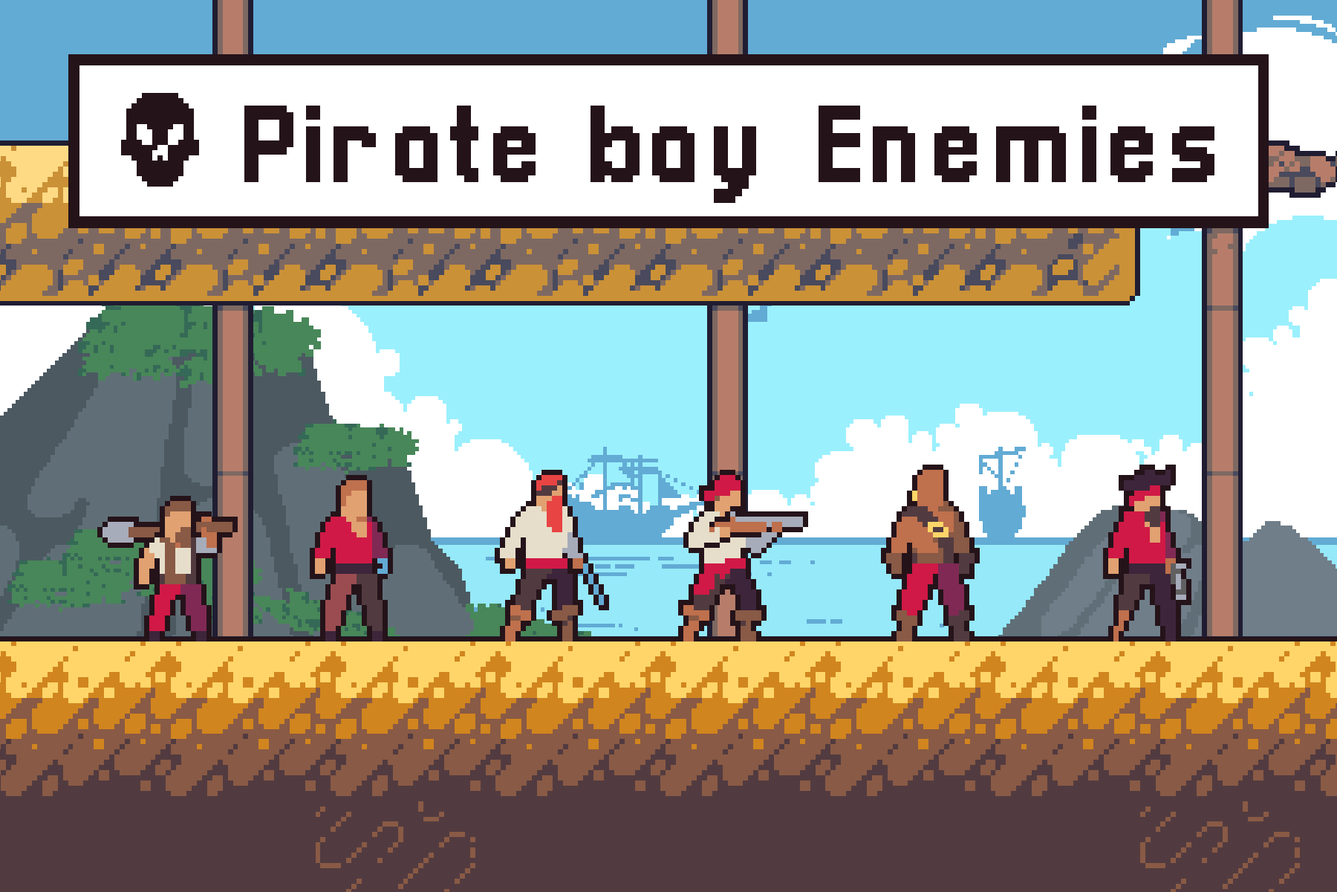
<style>
.page{position:relative;width:1337px;height:892px}
.page>*{position:absolute;margin:0}
.t1{font:111.2px "Pixellari";letter-spacing:0.025em;color:#25131a}
</style>
<div class="page">
<p class="t1" style="left:244px;top:106px;width:971px;height:97px">Pirate bay Enemies</p>
</div>
